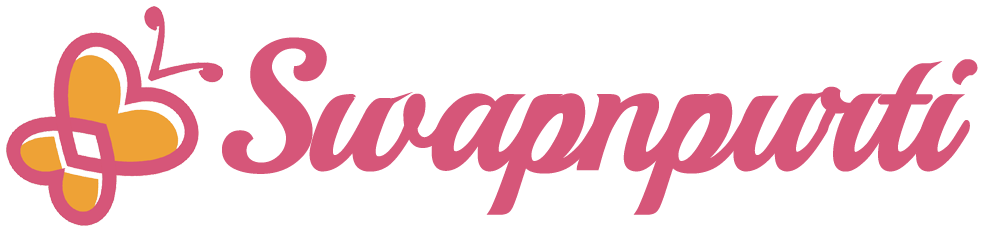
<style>
.page{position:relative;width:1000px;height:237px;background:#ffffff}
.page>*{position:absolute;margin:0}
.t1{font:179.2px "Playball-Regular";letter-spacing:-0.03em;color:#d65679;font-weight:bold}
</style>
<div class="page">
<p class="t1" style="left:222px;top:37px;width:756px;height:178px">Swapnpurti</p>
</div>
